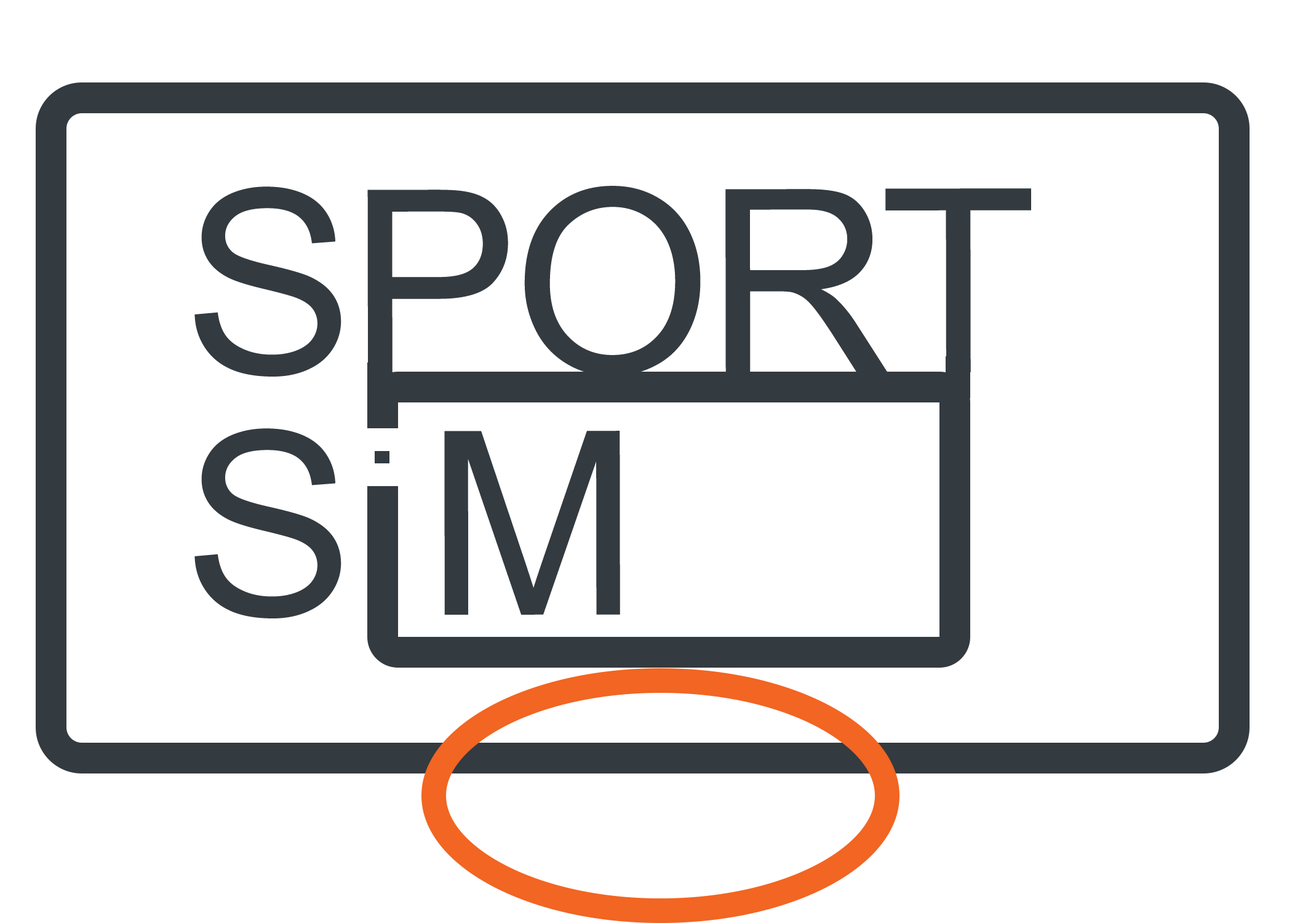
<style>
.page{position:relative;width:1292px;height:923px;background:#ffffff}
.page>*{position:absolute;margin:0}
.t1{font:256.4px "ArialMT";letter-spacing:-0.025em;color:#333a40}
.t2{font:256.4px "ArialMT";color:#333a40}
</style>
<div class="page">
<p class="t1" style="left:194px;top:186px;width:837px;height:191px">SPORT</p>
<p class="t2" style="left:194px;top:428px;width:426px;height:190px">S M</p>
</div>
